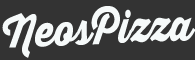
<style>
.page{position:relative;width:195px;height:60px;background:#333333}
.page>*{position:absolute;margin:0}
.t1{font:44.2px "ThirstyScriptExtraboldDemo";color:#f6fafa;scale:0.85 1}
</style>
<div class="page">
<p class="t1" style="left:2px;top:6px;width:194px;height:52px">NeosPizza</p>
</div>
